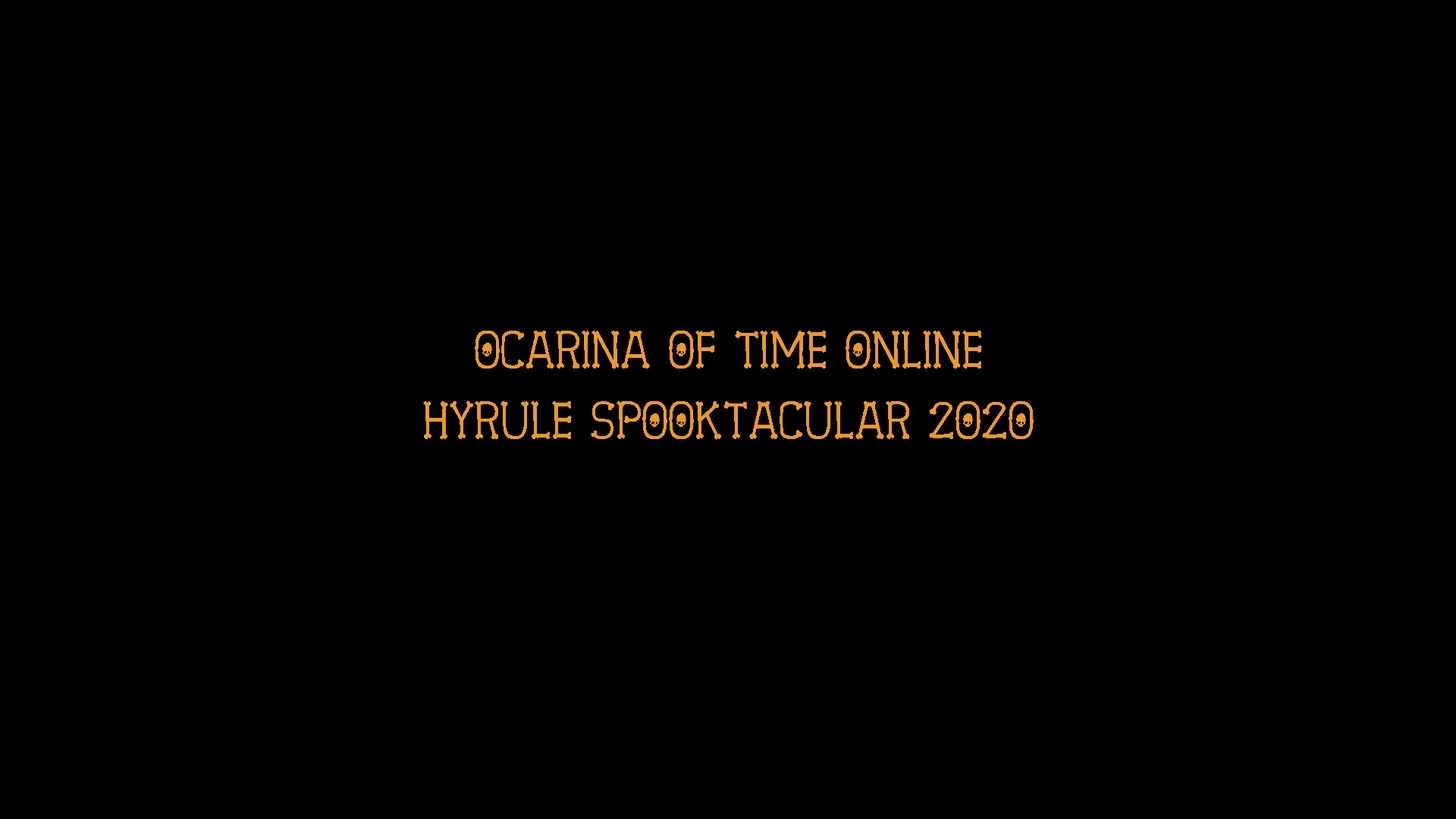
<style>
.page{position:relative;width:1456px;height:819px;background:#000000}
.page>*{position:absolute;margin:0}
.t1{font:45.5px "SpookySkeleton";color:#eb982d}
</style>
<div class="page">
<p class="t1" style="left:475px;top:331px;width:507px;height:38px">Ocarina of time online</p>
<p class="t1" style="left:423px;top:401px;width:611px;height:39px">Hyrule spooktacular 2020</p>
</div>
